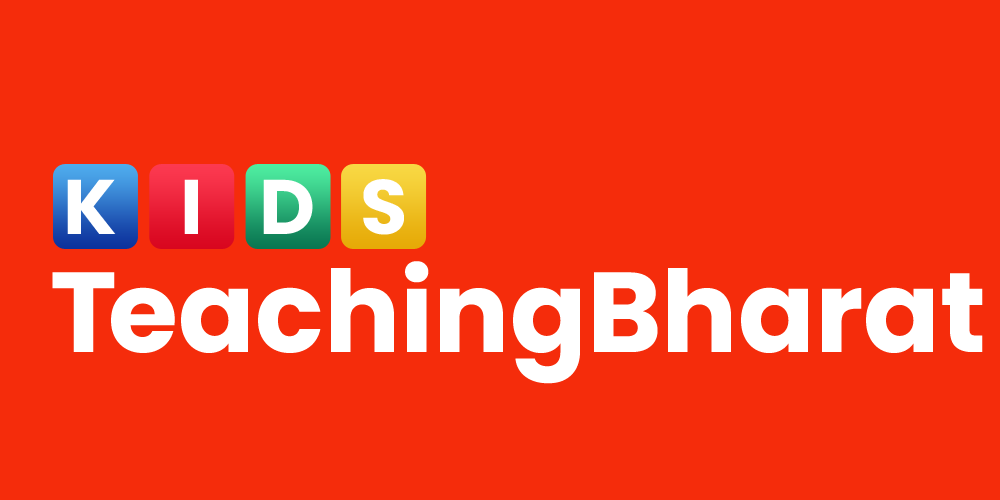
<style>
.page{position:relative;width:1000px;height:500px;background:#f52c0b}
.page>*{position:absolute;margin:0}
.t1{font:77.1px "Poppins-Bold";color:#ffffff}
.t2{font:113.3px "Poppins-Bold";color:#ffffff}
.t3{font:113.3px "Poppins-Bold";letter-spacing:-0.075em;color:#ffffff}
</style>
<div class="page">
<p class="t1" style="left:67px;top:179px;width:49px;height:55px">K</p>
<p class="t1" style="left:184px;top:179px;width:14px;height:55px">I</p>
<p class="t1" style="left:263px;top:179px;width:50px;height:55px">D</p>
<p class="t1" style="left:363px;top:179px;width:41px;height:56px">S</p>
<p class="t2" style="left:52px;top:261px;width:931px;height:123px"><span class="t3">T</span>eachingBharat</p>
</div>
